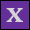
<style>
.page{position:relative;width:30px;height:30px;background:#642f99}
.page>*{position:absolute;margin:0}
.t1{font:30px "SitkaText-Bold";color:#d4d4d4}
</style>
<div class="page">
<p class="t1" style="left:6px;top:8px;width:17px;height:14px">x</p>
</div>
